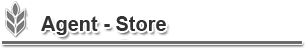
<style>
.page{position:relative;width:305px;height:50px;background:#ffffff}
.page>*{position:absolute;margin:0}
.t1{font:20px "Arial-BoldMT";color:#333333}
</style>
<div class="page">
<p class="t1" style="left:41px;top:16px;width:125px;height:19px">Agent - Store</p>
</div>
